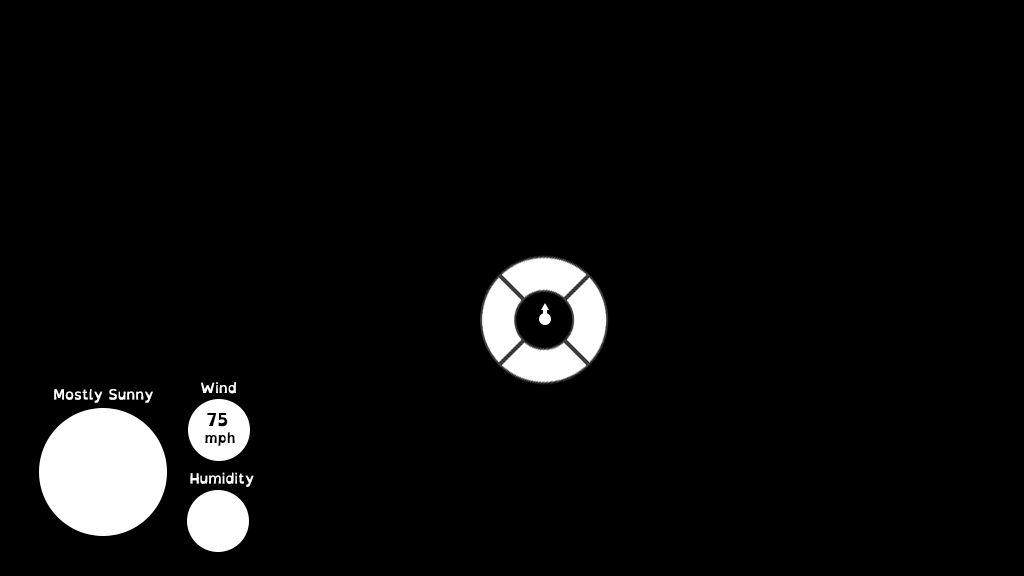
<style>
.page{position:relative;width:1024px;height:576px;background:#000000}
.page>*{position:absolute;margin:0}
.t1{font:14px "OpenDyslexic-Regular";color:#ffffff}
.t2{font:14px "OpenDyslexic-Bold";color:#000000}
.t3{font:18px "OpenDyslexic-Bold";color:#000000}
</style>
<div class="page">
<p class="t1" style="left:54px;top:389px;width:99px;height:14px">Mostly Sunny</p>
<p class="t1" style="left:201px;top:382px;width:35px;height:12px">Wind</p>
<p class="t2" style="left:205px;top:413px;width:30px;height:33px;text-align:center"><span class="t3">75</span> <br>mph</p>
<p class="t1" style="left:190px;top:472px;width:64px;height:15px">Humidity</p>
</div>
